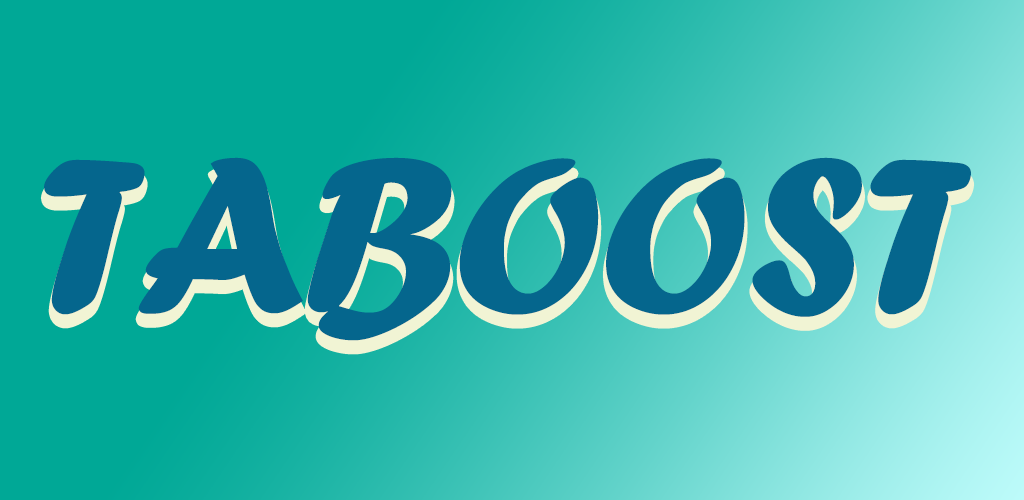
<style>
.page{position:relative;width:1024px;height:500px;background:#00a896}
.page>*{position:absolute;margin:0}
.t1{font:230.6px "ForteMT";color:#05668d}
</style>
<div class="page">
<p class="t1" style="left:44px;top:157px;width:927px;height:184px">TABOOST</p>
</div>
